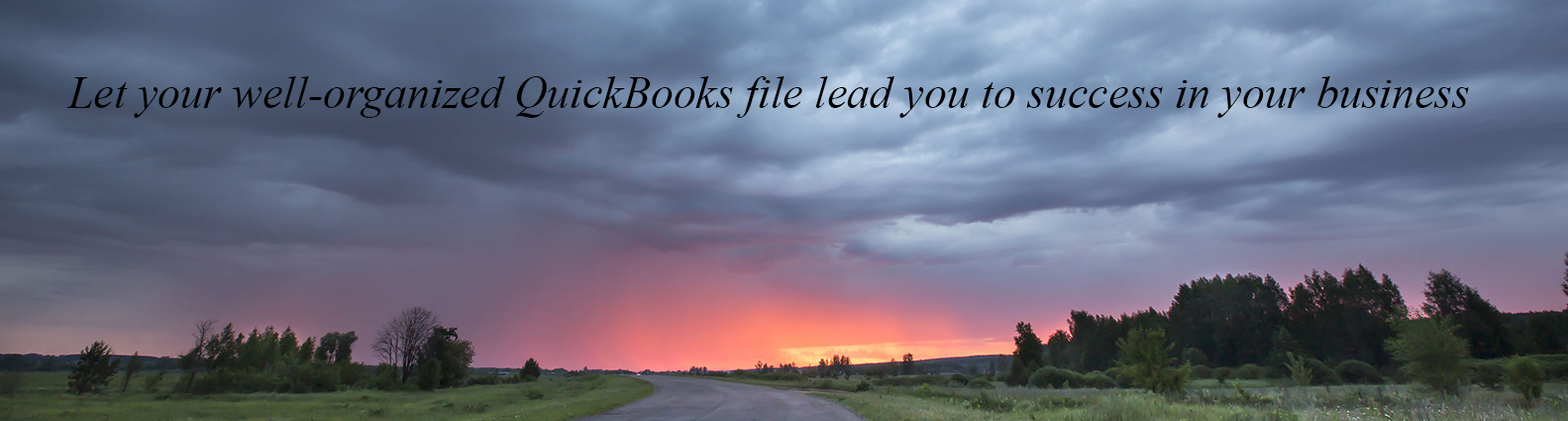
<style>
.page{position:relative;width:1568px;height:421px}
.page>*{position:absolute;margin:0}
.t1{font:45.4px "TimesNewRomanPS-ItalicMT";color:#000000}
</style>
<div class="page">
<p class="t1" style="left:66px;top:76px;width:1403px;height:42px">Let your well-organized QuickBooks file lead you to success in your business</p>
</div>
